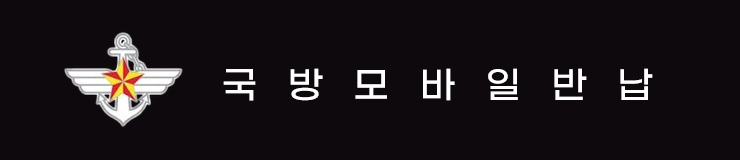
<style>
.page{position:relative;width:740px;height:160px;background:#0e090d}
.page>*{position:absolute;margin:0}
.t1{font:37px "GmarketSansTTFMedium";letter-spacing:0.82em;color:#ffffff}
</style>
<div class="page">
<p class="t1" style="left:223px;top:68px;width:430px;height:33px">국방모바일반납</p>
</div>
